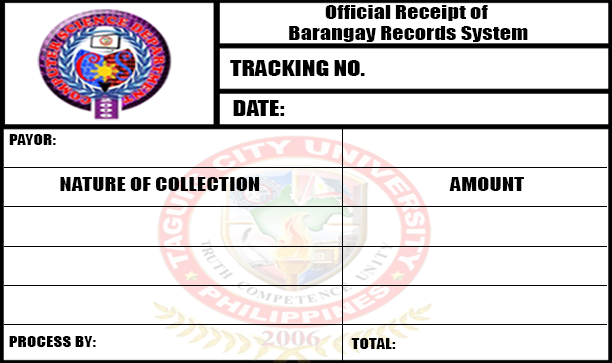
<style>
.page{position:relative;width:612px;height:363px;background:#ffffff}
.page>*{position:absolute;margin:0}
.t1{font:17.8px "Impact";color:#000000;scale:1.27 1}
.t2{font:19.7px "Impact";color:#000000;scale:1.27 1}
.t3{font:13.8px "Impact";color:#000000;scale:1.27 1}
</style>
<div class="page">
<p class="t1" style="left:289px;top:5px;width:239px;height:37px;text-align:center">Official Receipt of <br>Barangay Records System</p>
<p class="t2" style="left:230px;top:60px;width:135px;height:16px">TRACKING NO.</p>
<p class="t2" style="left:233px;top:100px;width:52px;height:16px">DATE:</p>
<p class="t3" style="left:9px;top:134px;width:47px;height:11px">PAYOR:</p>
<p class="t1" style="left:60px;top:177px;width:200px;height:14px">NATURE OF COLLECTION</p>
<p class="t1" style="left:449px;top:177px;width:75px;height:14px">AMOUNT</p>
<p class="t3" style="left:9px;top:336px;width:87px;height:11px">PROCESS BY:</p>
<p class="t3" style="left:351px;top:338px;width:45px;height:11px">TOTAL:</p>
</div>
